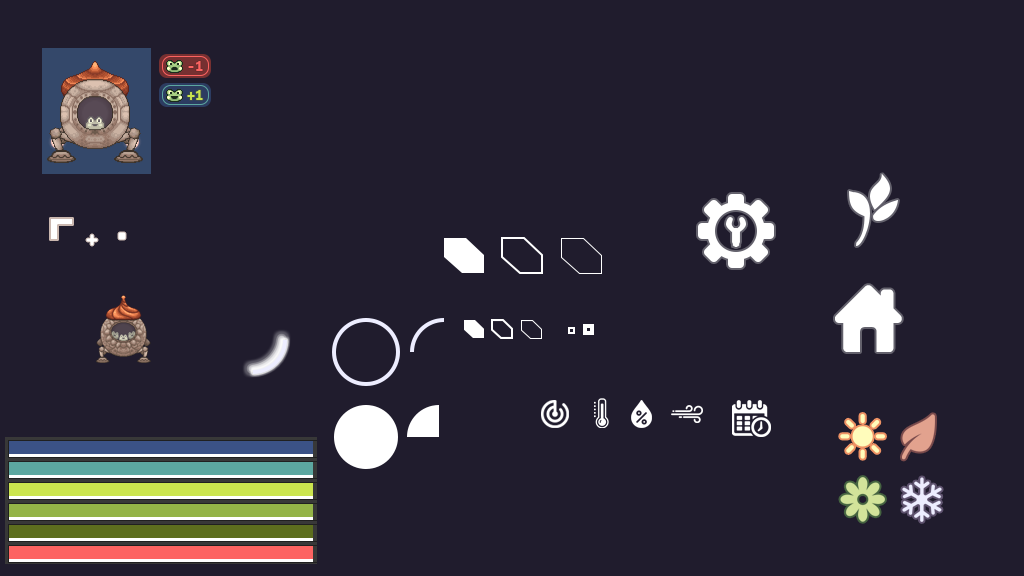
<style>
.page{position:relative;width:1024px;height:576px;background:#201c2d}
.page>*{position:absolute;margin:0}
.t1{font:16px "UbuntuMono-Bold";color:#fd6361}
.t2{font:16px "UbuntuMono-Bold";color:#cbe54e}
</style>
<div class="page">
<p class="t1" style="left:188px;top:61px;width:15px;height:10px">-1</p>
<p class="t2" style="left:187px;top:90px;width:16px;height:10px">+1</p>
</div>
